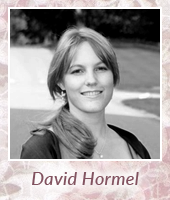
<style>
.page{position:relative;width:170px;height:200px}
.page>*{position:absolute;margin:0}
.t1{font:18px "Lato-MediumItalic";letter-spacing:0.018em;color:#81525f}
</style>
<div class="page">
<p class="t1" style="left:32px;top:172px;width:107px;height:13px">David Hormel</p>
</div>
